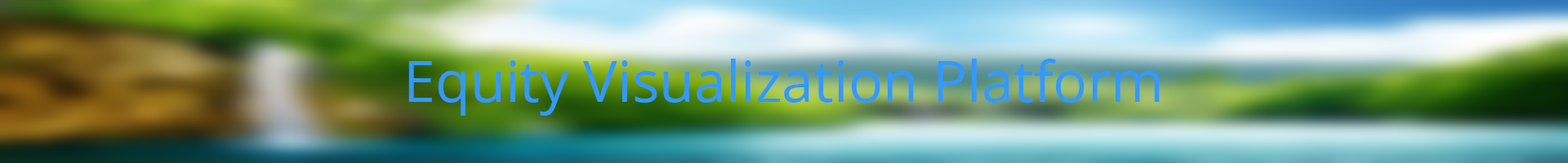
<style>
.page{position:relative;width:1568px;height:163px}
.page>*{position:absolute;margin:0}
.t1{font:57.2px "OpenSans";color:#3399ff}
</style>
<div class="page">
<p class="t1" style="left:408px;top:59px;width:752px;height:57px;text-align:center">Equity Visualization Platform<br><br>tion</p>
</div>
